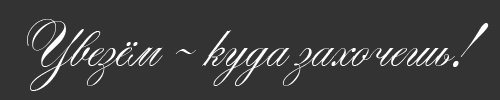
<style>
.page{position:relative;width:500px;height:100px;background:#333333}
.page>*{position:absolute;margin:0}
.t1{font:81.3px "AlexandraScript";color:#ffffff}
</style>
<div class="page">
<p class="t1" style="left:27px;top:19px;width:462px;height:72px">Увезём - куда захочешь!</p>
</div>
